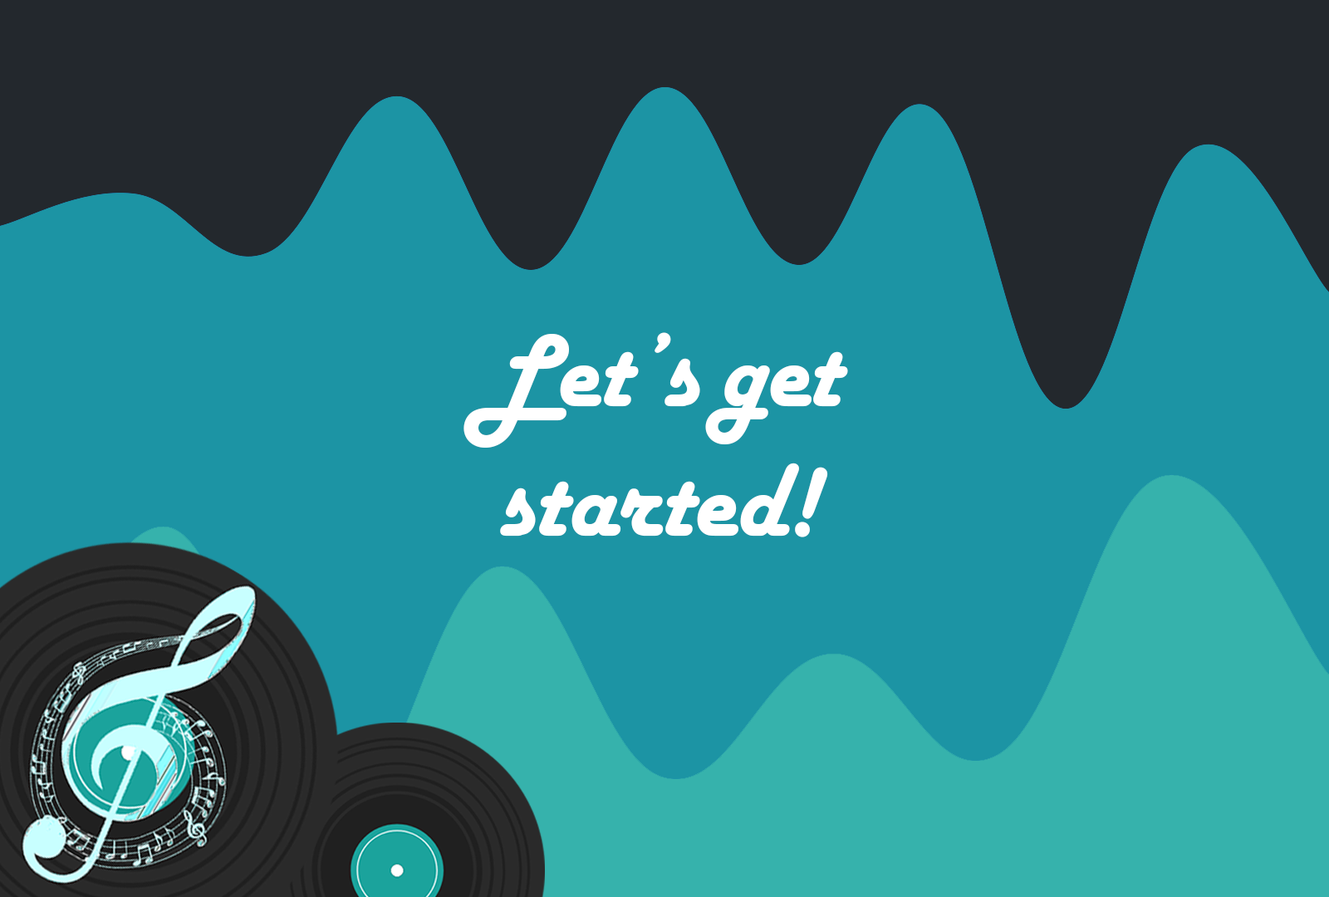
<style>
.page{position:relative;width:1329px;height:897px;background:#1c94a4}
.page>*{position:absolute;margin:0}
.t1{font:108px "HarlowSolidPlain";color:#ffffff}
</style>
<div class="page">
<p class="t1" style="left:464px;top:332px;width:384px;height:205px;text-align:center">Let’s get started!</p>
</div>
